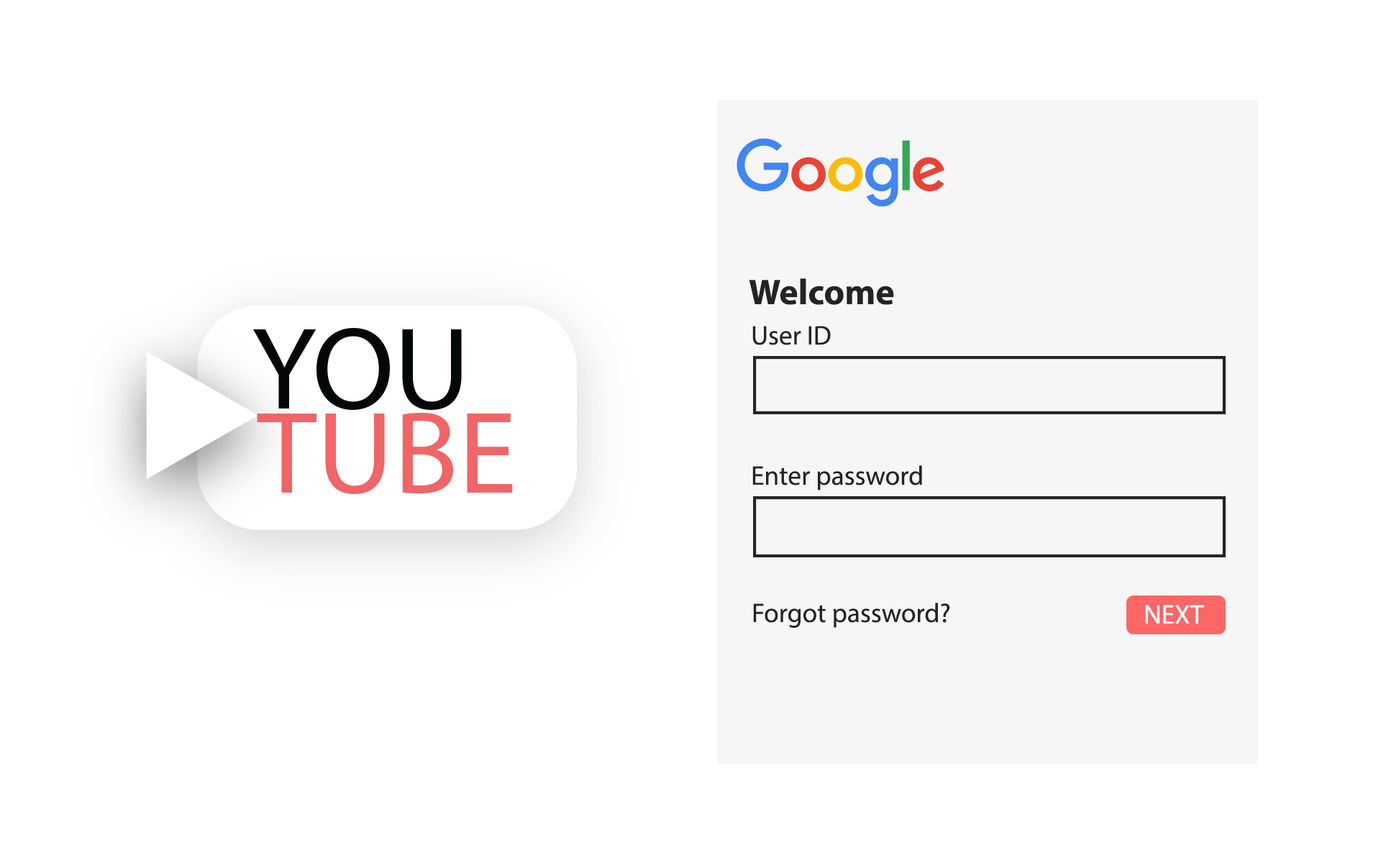
<style>
.page{position:relative;width:1381px;height:863px;background:#ffffff}
.page>*{position:absolute;margin:0}
.t1{font:36px "MyriadPro-Bold";color:#242424}
.t2{font:27px "MyriadPro-Regular";color:#242424}
.t3{font:27px "MyriadPro-Regular";color:#fffefd}
</style>
<div class="page">
<p class="t1" style="left:749px;top:278px;width:145px;height:27px">Welcome</p>
<p class="t2" style="left:753px;top:326px;width:78px;height:19px">User ID</p>
<p class="t2" style="left:753px;top:465px;width:169px;height:26px">Enter password</p>
<p class="t2" style="left:753px;top:603px;width:197px;height:25px">Forgot password?</p>
<p class="t3" style="left:1145px;top:605px;width:59px;height:19px">NEXT</p>
</div>
